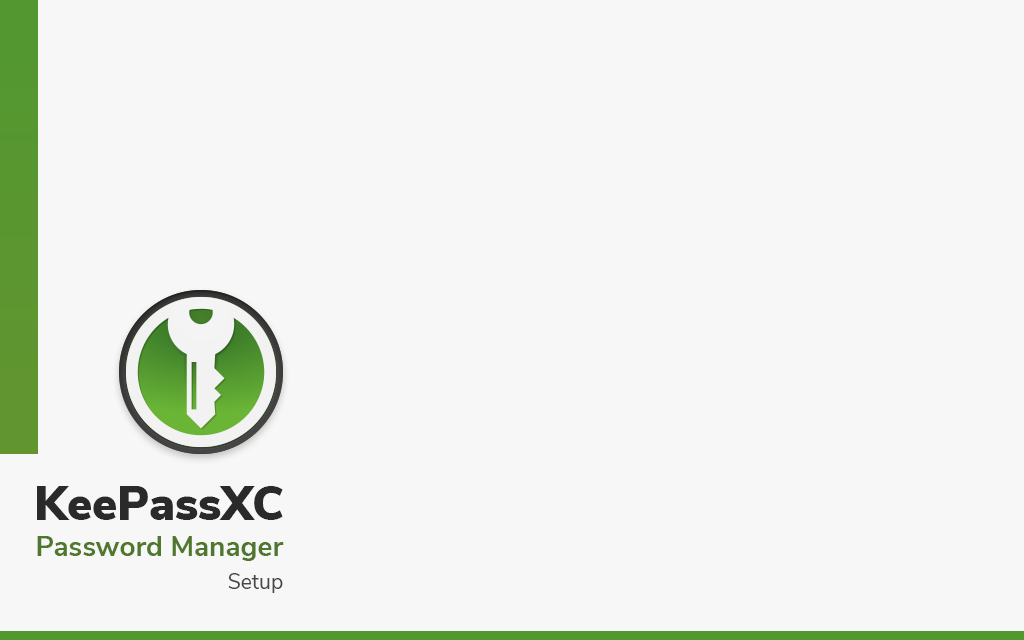
<style>
.page{position:relative;width:1024px;height:640px;background:#f7f7f7}
.page>*{position:absolute;margin:0}
.t1{font:47.3px "NunitoSans-Black";color:#2a2a2a}
.t2{font:28px "NunitoSans-Bold";color:#50782c}
.t3{font:21.1px "NunitoSans-Regular";color:#474747}
</style>
<div class="page">
<p class="t1" style="left:37px;top:486px;width:246px;height:34px">KeePassXC</p>
<p class="t2" style="left:37px;top:536px;width:247px;height:25px">Password Manager</p>
<p class="t3" style="left:228px;top:573px;width:55px;height:20px">Setup</p>
</div>
